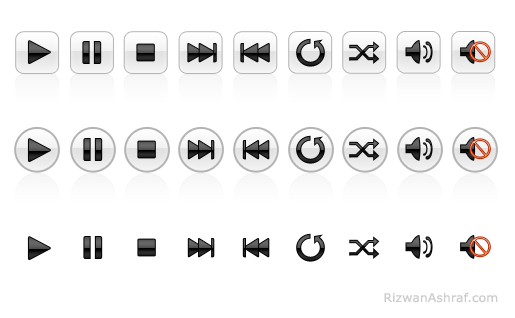
<style>
.page{position:relative;width:515px;height:318px;background:#ffffff}
.page>*{position:absolute;margin:0}
.t1{font:12px "Verdana";letter-spacing:0.01em;color:#cccccc;scale:1.03 1}
</style>
<div class="page">
<p class="t1" style="left:384px;top:292px;width:114px;height:11px">RizwanAshraf.com</p>
</div>
